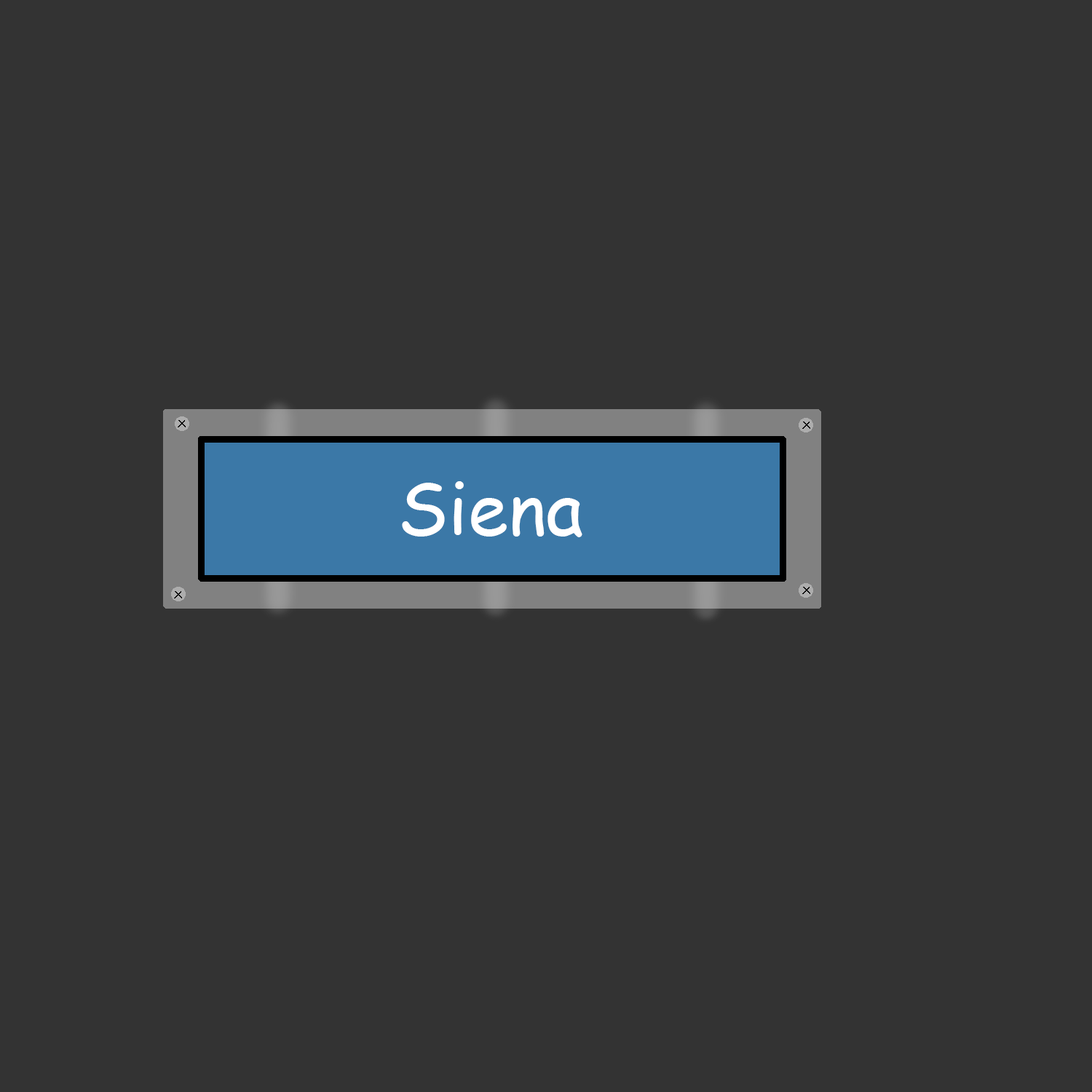
<style>
.page{position:relative;width:1092px;height:1092px;background:#333333}
.page>*{position:absolute;margin:0}
.t1{font:72.8px "ComicSansMS";color:#ffffff}
</style>
<div class="page">
<p class="t1" style="left:402px;top:481px;width:180px;height:56px">Siena</p>
</div>
